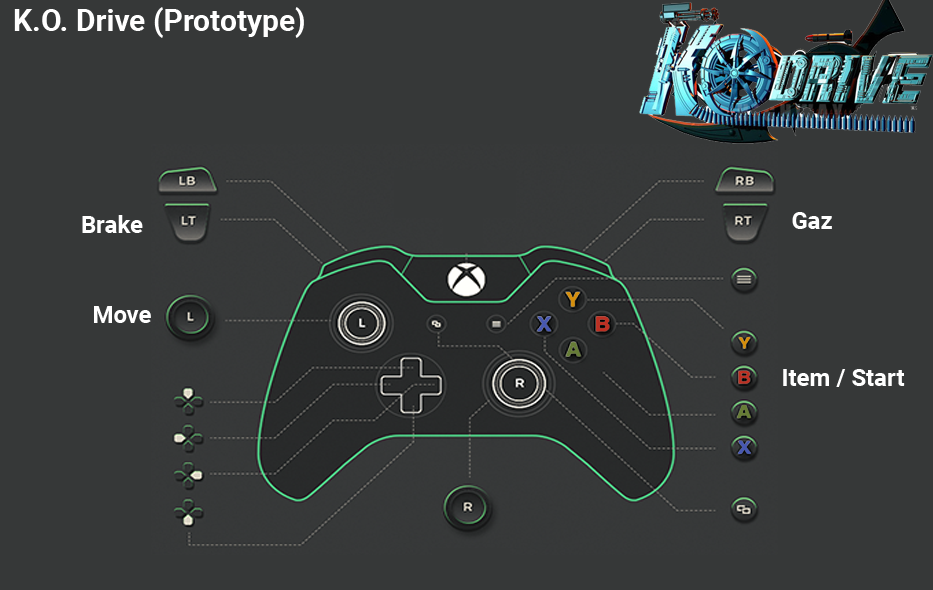
<style>
.page{position:relative;width:933px;height:590px;background:#363838}
.page>*{position:absolute;margin:0}
.t1{font:30px "Roboto-Bold";color:#ffffff}
.t2{font:24px "Roboto-Bold";color:#ffffff}
</style>
<div class="page">
<p class="t1" style="left:14px;top:7px;width:290px;height:31px">K.O. Drive (Prototype)</p>
<p class="t2" style="left:82px;top:215px;width:61px;height:18px">Brake</p>
<p class="t2" style="left:792px;top:212px;width:40px;height:17px">Gaz</p>
<p class="t2" style="left:94px;top:306px;width:57px;height:17px">Move</p>
<p class="t2" style="left:783px;top:369px;width:122px;height:18px">Item / Start</p>
</div>
